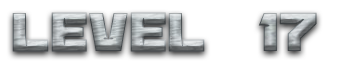
<style>
.page{position:relative;width:364px;height:64px;background:#ffffff}
.page>*{position:absolute;margin:0}
.t1{font:60px "BananaBrick"}
</style>
<div class="page">
<p class="t1" style="left:12px;top:12px;width:305px;height:40px">Level  17</p>
</div>
